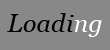
<style>
.page{position:relative;width:110px;height:50px;background:#888888}
.page>*{position:absolute;margin:0}
.t1{font:25px "Georgia-Italic";letter-spacing:0.01em;color:#000000}
.t2{font:25px "Georgia-Italic";letter-spacing:0.01em;color:#ffffff}
</style>
<div class="page">
<p class="t1" style="left:7px;top:13px;width:95px;height:24px">Loadi<span class="t2">ng</span></p>
</div>
